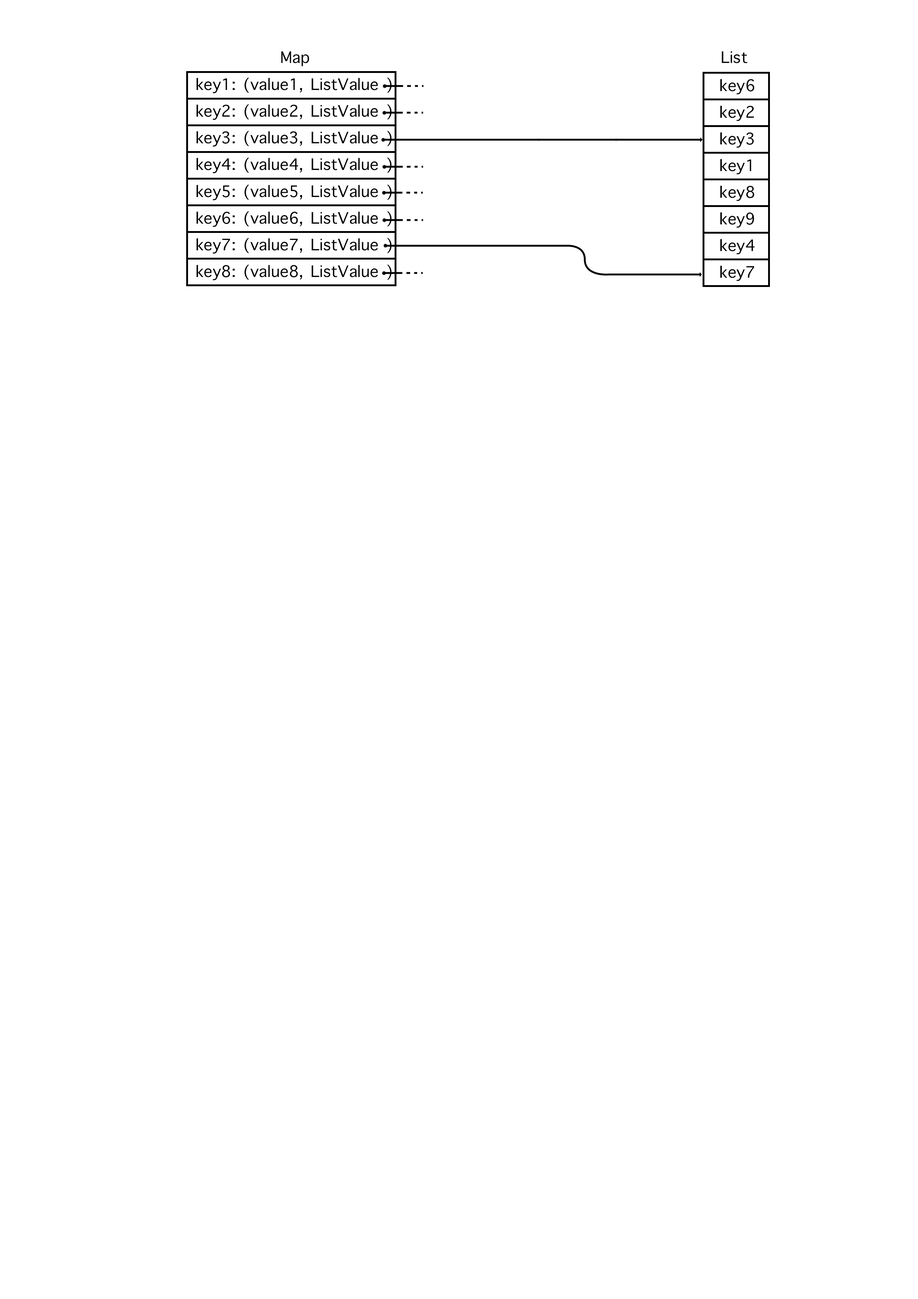
<style>
.page{position:relative;width:918px;height:1299px;background:#ffffff}
.page>*{position:absolute;margin:0}
.t1{font:21.6px "AppleSymbols";color:#000000}
</style>
<div class="page">
<p class="t1" style="left:281px;top:51px;width:28px;height:15px">Map</p>
<p class="t1" style="left:722px;top:51px;width:25px;height:12px">List</p>
<p class="t1" style="left:197px;top:77px;width:195px;height:16px">key1: (value1, ListValue )</p>
<p class="t1" style="left:720px;top:79px;width:35px;height:15px">key6</p>
<p class="t1" style="left:197px;top:104px;width:195px;height:16px">key2: (value2, ListValue )</p>
<p class="t1" style="left:720px;top:106px;width:34px;height:15px">key2</p>
<p class="t1" style="left:197px;top:131px;width:195px;height:16px">key3: (value3, ListValue )</p>
<p class="t1" style="left:720px;top:132px;width:34px;height:16px">key3</p>
<p class="t1" style="left:197px;top:157px;width:195px;height:16px">key4: (value4, ListValue )</p>
<p class="t1" style="left:720px;top:159px;width:32px;height:15px">key1</p>
<p class="t1" style="left:197px;top:184px;width:195px;height:16px">key5: (value5, ListValue )</p>
<p class="t1" style="left:720px;top:185px;width:35px;height:16px">key8</p>
<p class="t1" style="left:197px;top:211px;width:195px;height:16px">key6: (value6, ListValue )</p>
<p class="t1" style="left:720px;top:212px;width:34px;height:16px">key9</p>
<p class="t1" style="left:197px;top:238px;width:195px;height:16px">key7: (value7, ListValue )</p>
<p class="t1" style="left:720px;top:239px;width:35px;height:15px">key4</p>
<p class="t1" style="left:197px;top:264px;width:195px;height:16px">key8: (value8, ListValue )</p>
<p class="t1" style="left:720px;top:265px;width:35px;height:16px">key7</p>
</div>
